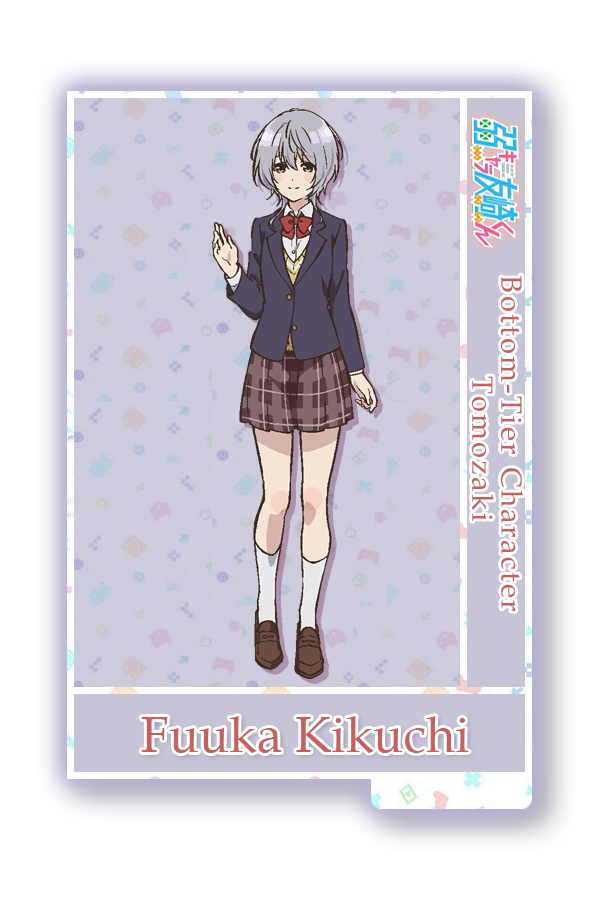
<style>
.page{position:relative;width:600px;height:900px;background:#ffffff}
.page>*{position:absolute;margin:0}
.t1{font:29.2px/29.2px "BookAntiqua";letter-spacing:0.08em;color:#c65f5d}
.t2{font:50px "BookAntiqua";color:#c65f5d}
</style>
<div class="page">
<p class="t1" style="left:471px;top:275px;width:52px;height:336px;text-align:center;rotate:90deg">Bottom-Tier Character <br>Tomozaki</p>
<p class="t2" style="left:141px;top:716px;width:328px;height:37px">Fuuka Kikuchi</p>
</div>
